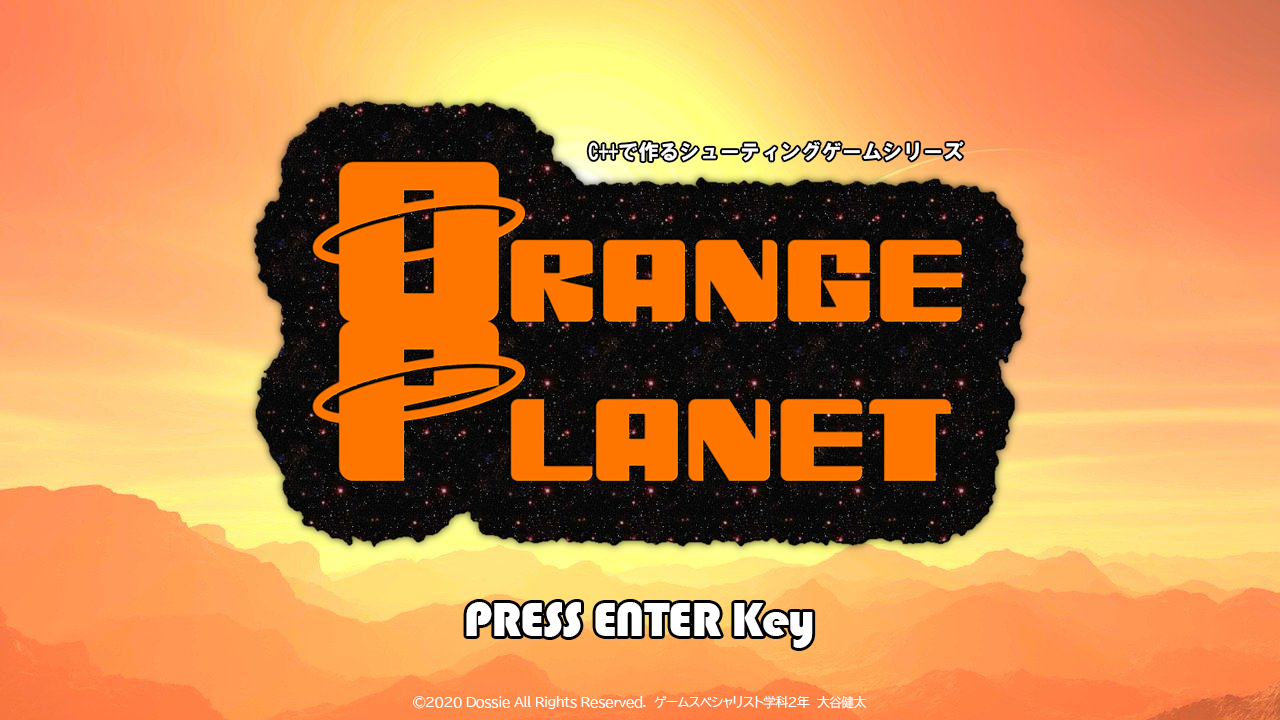
<style>
.page{position:relative;width:1280px;height:720px}
.page>*{position:absolute;margin:0}
.t1{font:20.8px "HGSoeiKakugothicUB";letter-spacing:-0.025em;color:#ffffff}
.t2{font:50px "Bauhaus93";letter-spacing:-0.025em;color:#ffffff}
.t3{font:12.5px "BIZ-UDPGothic";letter-spacing:-0.025em;color:#ffffff}
</style>
<div class="page">
<p class="t1" style="left:588px;top:141px;width:376px;height:21px">C++で作るシューティングゲームシリーズ</p>
<p class="t2" style="left:466px;top:602px;width:347px;height:46px">PRESS ENTER Key</p>
<p class="t3" style="left:413px;top:696px;width:453px;height:13px">©2020 Dossie All Rights Reserved.  ゲームスペシャリスト学科2年　大谷健太</p>
</div>
